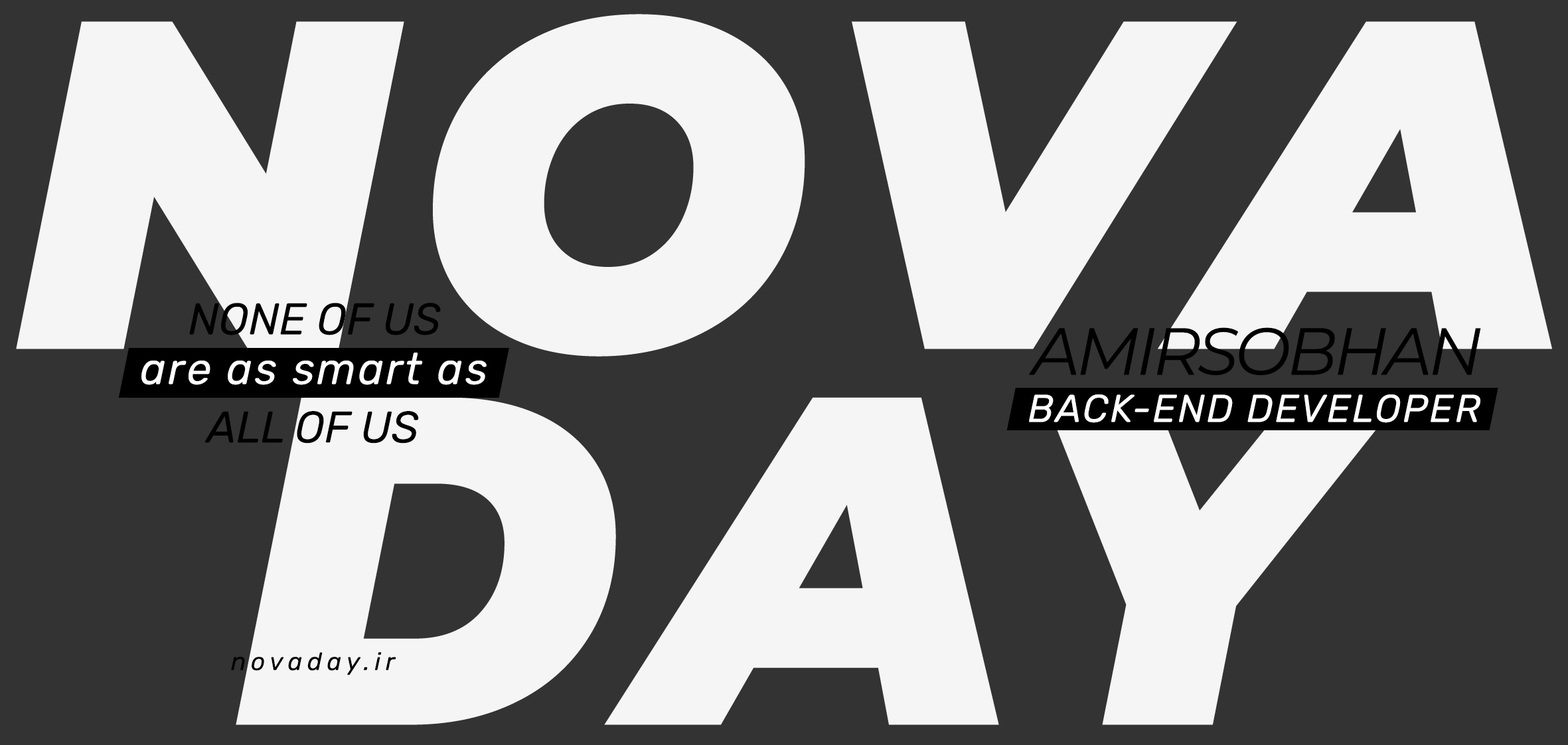
<style>
.page{position:relative;width:1568px;height:745px;background:#333333}
.page>*{position:absolute;margin:0}
.t1{font:467.1px/375.8px "Montserrat-BlackItalic";letter-spacing:0.05em;color:#f5f5f5}
.t2{font:44.3px "Rubik-Italic";color:#000000}
.t3{font:66.4px "Montserrat-Italic";letter-spacing:-0.05em;color:#000000}
.t4{font:44.3px "Rubik-Italic";letter-spacing:0.05em;color:#ffffff}
.t5{font:38.7px "Rubik-Italic";letter-spacing:0.05em;color:#ffffff}
.t6{font:24.9px "Rubik-Italic";letter-spacing:0.2em;color:#000000}
</style>
<div class="page">
<p class="t1" style="left:16px;top:14px;width:1536px;height:711px;text-align:center">NOVA<br>DAY</p>
<p class="t2" style="left:189px;top:303px;width:252px;height:32px">NONE OF US</p>
<p class="t3" style="left:1029px;top:327px;width:452px;height:48px">AMIRSOBHAN</p>
<p class="t4" style="left:141px;top:353px;width:346px;height:32px">are as smart as</p>
<p class="t5" style="left:1029px;top:394px;width:451px;height:29px">BACK-END DEVELOPER</p>
<p class="t2" style="left:205px;top:411px;width:214px;height:32px">ALL OF US</p>
<p class="t6" style="left:231px;top:652px;width:165px;height:23px">novaday.ir</p>
</div>
